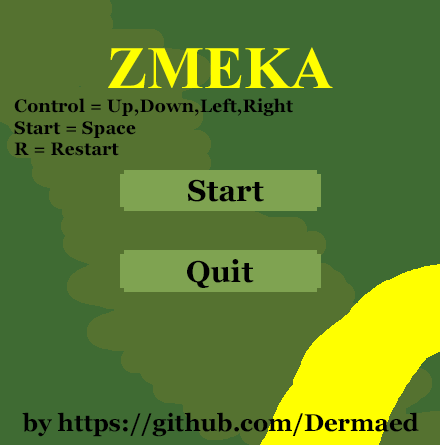
<style>
.page{position:relative;width:440px;height:445px;background:#3f6b33}
.page>*{position:absolute;margin:0}
.t1{font:18px "Georgia-Bold";color:#000000}
.t2{font:30px "Georgia-Bold";color:#000000}
.t3{font:24px "Georgia-Bold";color:#000000}
</style>
<div class="page">
<p class="t1" style="left:14px;top:98px;width:279px;height:58px">Control = Up,Down,Left,Right<br>Start = Space<br>R = Restart</p>
<p class="t2" style="left:187px;top:259px;width:67px;height:29px">Quit</p>
<p class="t3" style="left:22px;top:412px;width:397px;height:25px">by https://github.com/Dermaed</p>
</div>
